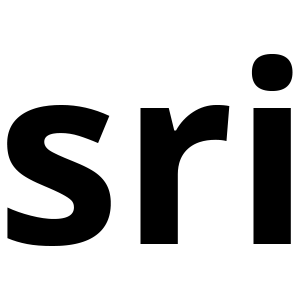
<style>
.page{position:relative;width:300px;height:300px;background:#ffffff}
.page>*{position:absolute;margin:0}
.t1{font:250px "OpenSans-Bold";color:#000000}
</style>
<div class="page">
<p class="t1" style="left:7px;top:54px;width:286px;height:192px">sri</p>
</div>
